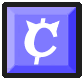
<style>
.page{position:relative;width:84px;height:80px;background:#7f79ff}
.page>*{position:absolute;margin:0}
.t1{font:48px "URWBookman-DemiItalic";color:#ffffff}
</style>
<div class="page">
<p class="t1" style="left:24px;top:23px;width:34px;height:35px">C</p>
</div>
